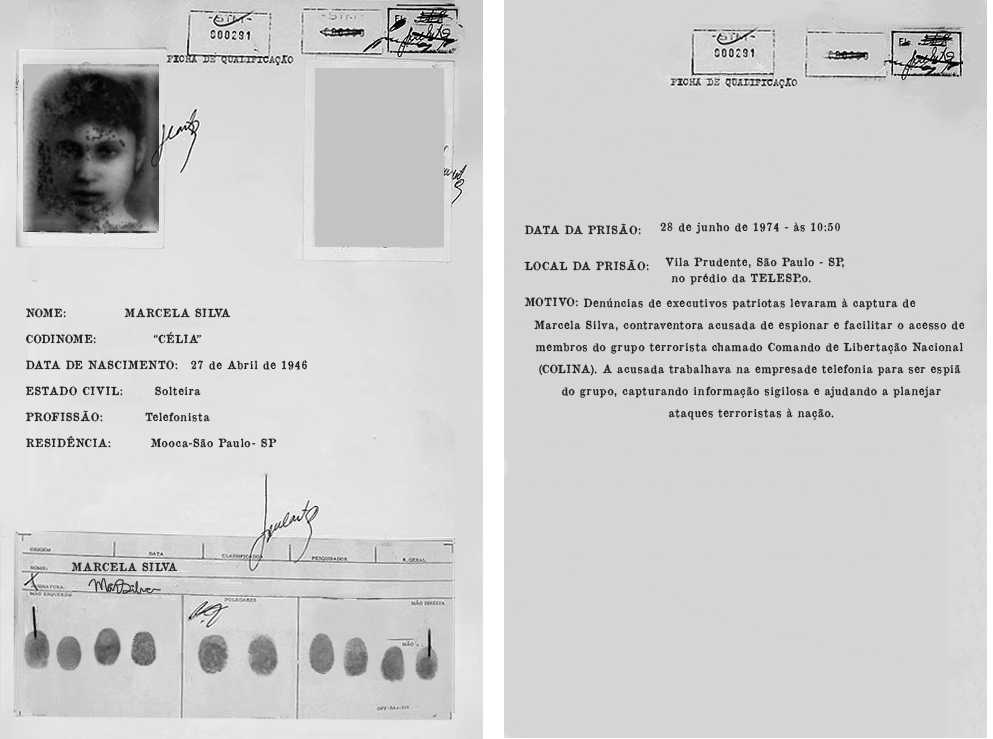
<style>
.page{position:relative;width:993px;height:739px;background:#d5d5d5}
.page>*{position:absolute;margin:0}
.t1{font:11px/16px "OldNewspaperTypes";letter-spacing:0.06em;color:#222222}
.t2{font:11px/35px "OldNewspaperTypes";letter-spacing:0.06em;color:#222222}
.t3{font:11px/36px "OldNewspaperTypes";letter-spacing:0.06em;color:#222222}
.t4{font:11px/26px "OldNewspaperTypes";letter-spacing:0.06em;color:#222222}
.t5{font:11px/22px "OldNewspaperTypes";letter-spacing:0.06em;color:#222222}
.t6{font:11px "OldNewspaperTypes";letter-spacing:0.06em;color:#222222}
</style>
<div class="page">
<p class="t1" style="left:660px;top:222px;width:184px;height:63px;text-align:center"><span class="t2">                          28 de junho de 1974 - às 10:50<br>       </span>                     Vila Prudente, São Paulo - SP,<br>                      no prédio da TELESP.o.</p>
<p class="t3" style="left:524px;top:223px;width:125px;height:84px"><span class="t4">DATA DA PRISÃO:  <br></span>LOCAL DA PRISÃO:<br>MOTIVO:</p>
<p class="t5" style="left:534px;top:298px;width:431px;height:122px;text-align:center">Denúncias de executivos patriotas levaram à captura de <br>Marcela Silva, contraventora acusada de espionar e facilitar o acesso de <br>membros do grupo terrorista chamado Comando de Libertação Nacional <br>(COLINA). A acusada trabalhava na empresade telefonia para ser espiã <br>do grupo, capturando informação sigilosa e ajudando a planejar<br>ataques terroristas à nação.</p>
<p class="t4" style="left:25px;top:308px;width:153px;height:140px">NOME:<br>CODINOME:<br>DATA DE NASCIMENTO:<br>ESTADO CIVIL:<br>PROFISSÃO:<br>RESIDÊNCIA:</p>
<p class="t4" style="left:124px;top:308px;width:183px;height:140px;text-align:center">MARCELA SILVA<br>“CÉLIA”<br>   27 de Abril de 1946<br>Solteira<br>Telefonista<br>                Mooca-São Paulo- SP</p>
<p class="t6" style="left:71px;top:562px;width:107px;height:10px">MARCELA SILVA</p>
</div>
